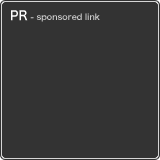
<style>
.page{position:relative;width:160px;height:160px;background:#333333}
.page>*{position:absolute;margin:0}
.t1{font:8px "HiraKakuPro-W6";color:#cccccc}
.t2{font:12px "HiraKakuPro-W6";color:#ffffff}
</style>
<div class="page">
<p class="t1" style="left:11px;top:10px;width:89px;height:12px"><span class="t2">PR</span> - sponsored link</p>
</div>
